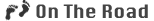
<style>
.page{position:relative;width:154px;height:21px;background:#ffffff}
.page>*{position:absolute;margin:0}
.t1{font:18px "Silom";color:#444444}
</style>
<div class="page">
<p class="t1" style="left:36px;top:4px;width:112px;height:14px">On The Road</p>
</div>
